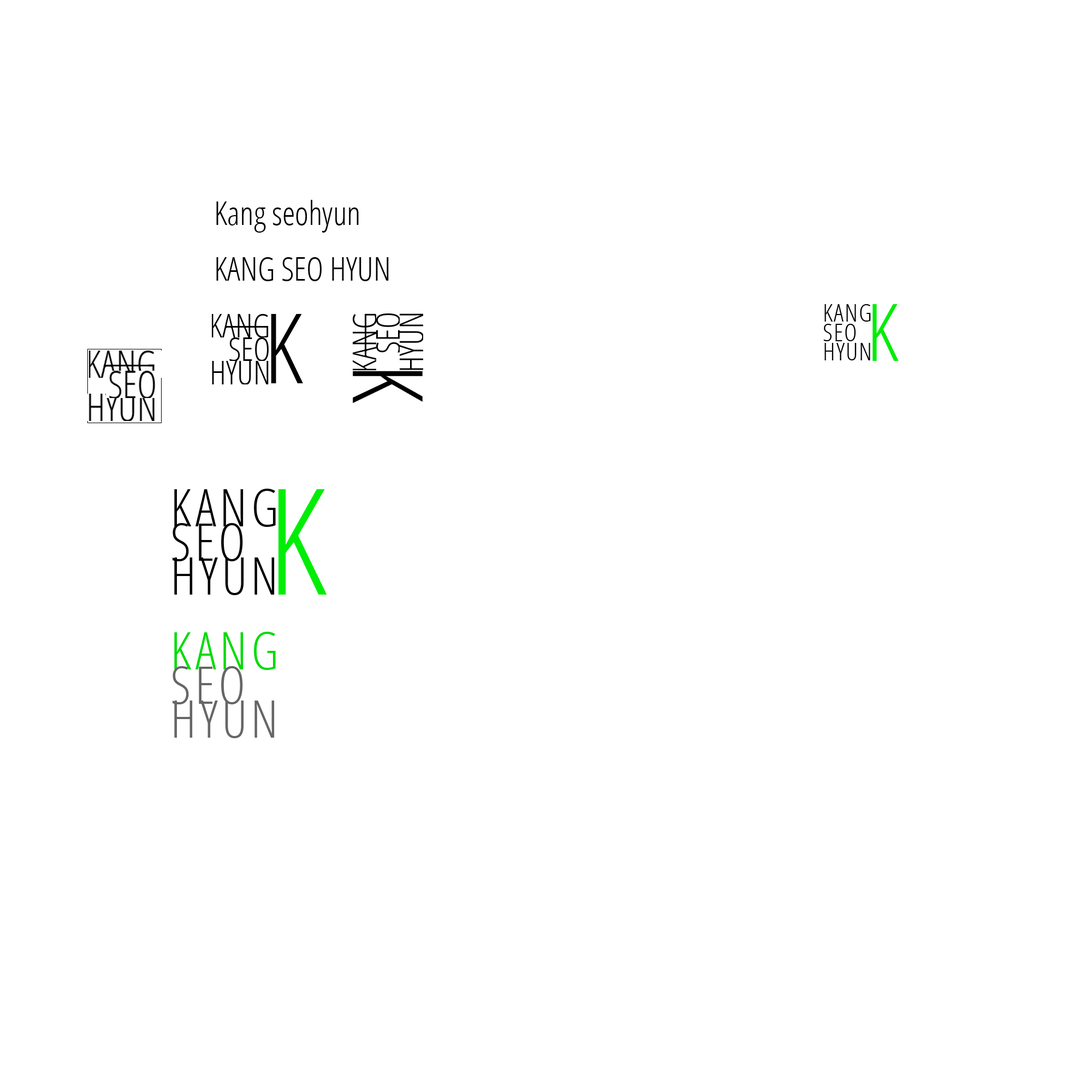
<style>
.page{position:relative;width:1092px;height:1092px;background:#ffffff}
.page>*{position:absolute;margin:0}
.t1{font:32.8px "OpenSansCondensed-Light";color:#000000}
.t2{font:24.6px/19.2px "OpenSansCondensed-Light";letter-spacing:0.045em;color:#000000}
.t3{font:79.4px "OpenSansCondensed-Light";color:#00ed06}
.t4{font:97.4px "OpenSansCondensed-Light";color:#000000}
.t5{font:51.6px/34.1px "OpenSansCondensed-Light";letter-spacing:0.075em;color:#000000}
.t6{font:148px "OpenSansCondensed-Light";color:#00ed06}
.t7{font:51.6px/34.1px "OpenSansCondensed-Light";letter-spacing:0.075em;color:#666666}
.t8{font:51.6px/34.1px "OpenSansCondensed-Light";letter-spacing:0.075em;color:#00db05}
</style>
<div class="page">
<p class="t1" style="left:216px;top:200px;width:143px;height:33px">Kang seohyun</p>
<p class="t1" style="left:216px;top:257px;width:173px;height:24px">KANG SEO HYUN</p>
<p class="t2" style="left:823px;top:304px;width:48px;height:56px">KANG<br>SEO<br>HYUN</p>
<p class="t3" style="left:872px;top:304px;width:27px;height:57px">K</p>
<p class="t4" style="left:271px;top:314px;width:32px;height:69px">K</p>
<p class="t4" style="left:353px;top:371px;width:70px;height:32px;rotate:90deg">K</p>
<p class="t5" style="left:173px;top:489px;width:103px;height:106px">KANG<br>SEO<br>HYUN</p>
<p class="t6" style="left:278px;top:489px;width:49px;height:106px">K</p>
<p class="t7" style="left:173px;top:632px;width:103px;height:106px"><span class="t8">KANG<br></span>SEO<br>HYUN</p>
</div>
